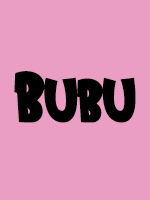
<style>
.page{position:relative;width:150px;height:200px;background:#ea9ec4}
.page>*{position:absolute;margin:0}
.t1{font:73px "SaiyanSans";color:#000000}
</style>
<div class="page">
<p class="t1" style="left:14px;top:71px;width:122px;height:52px">Bubu</p>
</div>
